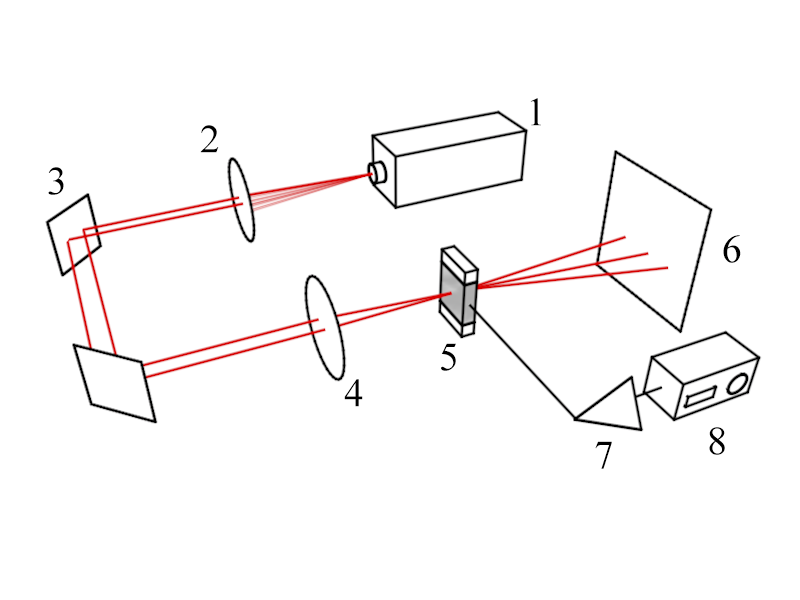
<style>
.page{position:relative;width:800px;height:600px;background:#ffffff}
.page>*{position:absolute;margin:0}
.t1{font:68.1px "TimesNewRomanPSMT";color:#000000}
</style>
<div class="page">
<p class="t1" style="left:530px;top:98px;width:11px;height:28px">1</p>
<p class="t1" style="left:200px;top:125px;width:19px;height:28px">2</p>
<p class="t1" style="left:48px;top:167px;width:16px;height:28px">3</p>
<p class="t1" style="left:723px;top:235px;width:18px;height:28px">6</p>
<p class="t1" style="left:441px;top:343px;width:15px;height:28px">5</p>
<p class="t1" style="left:344px;top:379px;width:19px;height:28px">4</p>
<p class="t1" style="left:709px;top:427px;width:16px;height:28px">8</p>
<p class="t1" style="left:595px;top:441px;width:17px;height:28px">7</p>
</div>
